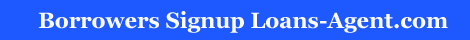
<style>
.page{position:relative;width:470px;height:40px;background:#1e59ff}
.page>*{position:absolute;margin:0}
.t1{font:22px "Georgia-Bold";color:#fbfaff}
</style>
<div class="page">
<p class="t1" style="left:38px;top:11px;width:410px;height:22px">Borrowers Signup Loans-Agent.com</p>
</div>
